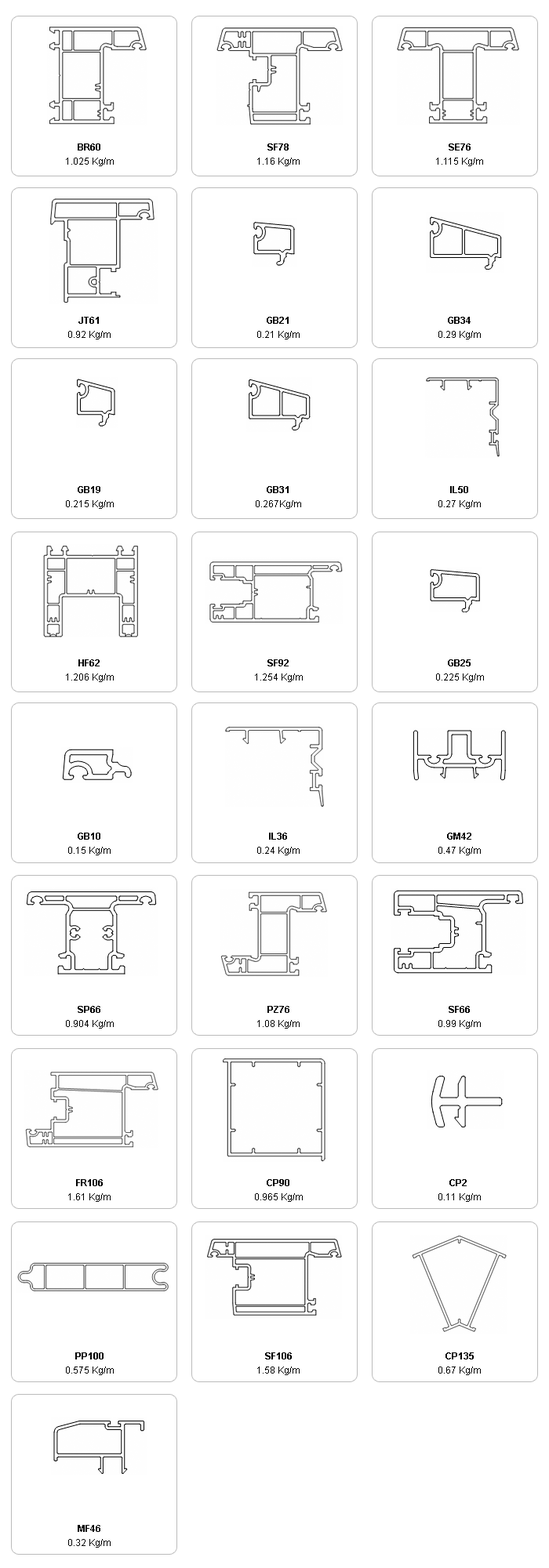
<style>
.page{position:relative;width:549px;height:1568px;background:#ffffff}
.page>*{position:absolute;margin:0}
.t1{font:9.4px "Arial-BoldMT";color:#000000}
.t2{font:9.4px "ArialMT";color:#000000}
</style>
<div class="page">
<p class="t1" style="left:78px;top:143px;width:22px;height:8px">BR60</p>
<p class="t1" style="left:267px;top:143px;width:22px;height:8px">SF78</p>
<p class="t1" style="left:448px;top:143px;width:22px;height:8px">SE76</p>
<p class="t2" style="left:66px;top:158px;width:48px;height:8px">1.025 Kg/m</p>
<p class="t2" style="left:257px;top:158px;width:42px;height:8px">1.16 Kg/m</p>
<p class="t2" style="left:436px;top:158px;width:47px;height:8px">1.115 Kg/m</p>
<p class="t1" style="left:78px;top:317px;width:21px;height:7px">JT61</p>
<p class="t1" style="left:267px;top:317px;width:22px;height:7px">GB21</p>
<p class="t1" style="left:448px;top:317px;width:22px;height:7px">GB34</p>
<p class="t2" style="left:68px;top:331px;width:43px;height:8px">0.92 Kg/m</p>
<p class="t2" style="left:257px;top:331px;width:42px;height:8px">0.21 Kg/m</p>
<p class="t2" style="left:438px;top:331px;width:43px;height:8px">0.29 Kg/m</p>
<p class="t1" style="left:78px;top:486px;width:22px;height:7px">GB19</p>
<p class="t1" style="left:267px;top:486px;width:22px;height:7px">GB31</p>
<p class="t1" style="left:450px;top:486px;width:18px;height:7px">IL50</p>
<p class="t2" style="left:66px;top:500px;width:48px;height:9px">0.215 Kg/m</p>
<p class="t2" style="left:256px;top:500px;width:45px;height:9px">0.267Kg/m</p>
<p class="t2" style="left:438px;top:500px;width:43px;height:9px">0.27 Kg/m</p>
<p class="t1" style="left:78px;top:659px;width:22px;height:7px">HF62</p>
<p class="t1" style="left:267px;top:659px;width:22px;height:7px">SF92</p>
<p class="t1" style="left:448px;top:659px;width:22px;height:7px">GB25</p>
<p class="t2" style="left:66px;top:673px;width:48px;height:9px">1.206 Kg/m</p>
<p class="t2" style="left:255px;top:673px;width:48px;height:9px">1.254 Kg/m</p>
<p class="t2" style="left:436px;top:673px;width:48px;height:9px">0.225 Kg/m</p>
<p class="t1" style="left:78px;top:833px;width:22px;height:7px">GB10</p>
<p class="t1" style="left:269px;top:833px;width:18px;height:7px">IL36</p>
<p class="t1" style="left:447px;top:833px;width:24px;height:7px">GM42</p>
<p class="t2" style="left:68px;top:847px;width:43px;height:8px">0.15 Kg/m</p>
<p class="t2" style="left:257px;top:847px;width:42px;height:8px">0.24 Kg/m</p>
<p class="t2" style="left:438px;top:847px;width:43px;height:8px">0.47 Kg/m</p>
<p class="t1" style="left:78px;top:1006px;width:22px;height:7px">SP66</p>
<p class="t1" style="left:267px;top:1006px;width:22px;height:7px">PZ76</p>
<p class="t1" style="left:448px;top:1006px;width:22px;height:7px">SF66</p>
<p class="t2" style="left:66px;top:1020px;width:48px;height:9px">0.904 Kg/m</p>
<p class="t2" style="left:257px;top:1020px;width:42px;height:9px">1.08 Kg/m</p>
<p class="t2" style="left:438px;top:1020px;width:43px;height:9px">0.99 Kg/m</p>
<p class="t1" style="left:76px;top:1179px;width:27px;height:7px">FR106</p>
<p class="t1" style="left:267px;top:1179px;width:22px;height:7px">CP90</p>
<p class="t1" style="left:449px;top:1179px;width:17px;height:7px">CP2</p>
<p class="t2" style="left:68px;top:1193px;width:43px;height:9px">1.61 Kg/m</p>
<p class="t2" style="left:255px;top:1193px;width:48px;height:9px">0.965 Kg/m</p>
<p class="t2" style="left:438px;top:1193px;width:43px;height:9px">0.11 Kg/m</p>
<p class="t1" style="left:75px;top:1352px;width:28px;height:7px">PP100</p>
<p class="t1" style="left:265px;top:1352px;width:27px;height:7px">SF106</p>
<p class="t1" style="left:445px;top:1352px;width:29px;height:7px">CP135</p>
<p class="t2" style="left:66px;top:1367px;width:48px;height:8px">0.575 Kg/m</p>
<p class="t2" style="left:257px;top:1367px;width:42px;height:8px">1.58 Kg/m</p>
<p class="t2" style="left:438px;top:1367px;width:43px;height:8px">0.67 Kg/m</p>
<p class="t1" style="left:78px;top:1525px;width:22px;height:7px">MF46</p>
<p class="t2" style="left:68px;top:1539px;width:43px;height:9px">0.32 Kg/m</p>
</div>
